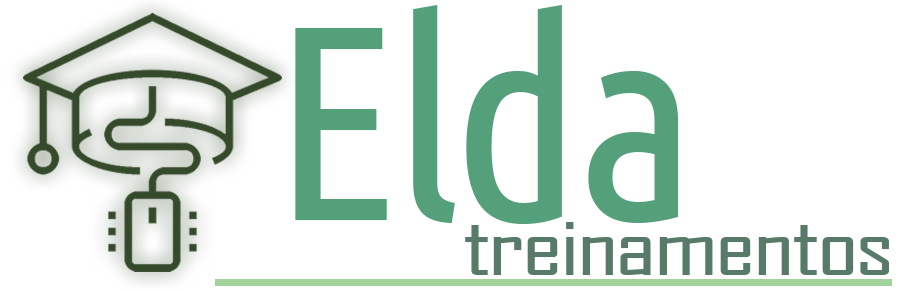
<style>
.page{position:relative;width:904px;height:291px;background:#ffffff}
.page>*{position:absolute;margin:0}
.t1{font:276.5px "UbuntuCondensed-Regular";letter-spacing:-0.025em;color:#53a07b}
.t2{font:79.5px "AgencyFB-Reg";letter-spacing:-0.025em;color:#577a69;scale:1.38 1}
</style>
<div class="page">
<p class="t1" style="left:295px;top:5px;width:383px;height:219px">Elda</p>
<p class="t2" style="left:465px;top:222px;width:424px;height:53px">treinamentos</p>
</div>
